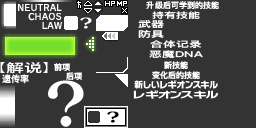
<style>
.page{position:relative;width:256px;height:128px;background:#333333}
.page>*{position:absolute;margin:0}
.t1{font:8px "DFKingGothicSC14-Semibold";letter-spacing:0.005em;color:#ffffff}
.t2{font:8px "DFKingGothicSC14-Semibold";letter-spacing:0.005em;color:#ffffff;scale:1.5 1}
.t3{font:8.4px "DFKingGothicSC14-Semibold";letter-spacing:0.005em;color:#ffffff;scale:1.56 1}
.t4{font:8px/10px "DFKingGothicSC14-Semibold";letter-spacing:0.005em;color:#ffffff;scale:1.6 1}
.t5{font:12px "DFKingGothicSC14-Semibold";letter-spacing:0.005em;color:#ffffff;scale:1.5 1}
.t6{font:8px/10px "DFKingGothicSC14-Semibold";letter-spacing:0.005em;color:#ffffff}
.t7{font:9px "DFKingGothicSC14-Semibold";letter-spacing:0.005em;color:#ffffff}
</style>
<div class="page">
<p class="t1" style="left:146px;top:1px;width:73px;height:8px">升级后可学到的技能</p>
<p class="t2" style="left:152px;top:11px;width:48px;height:8px">持有技能</p>
<p class="t3" style="left:138px;top:20px;width:26px;height:8px">武器</p>
<p class="t3" style="left:138px;top:30px;width:26px;height:8px">防具</p>
<p class="t4" style="left:149px;top:40px;width:54px;height:18px;text-align:center">合体记录<br>恶魔DNA</p>
<p class="t5" style="left:6px;top:62px;width:36px;height:12px">解说</p>
<p class="t1" style="left:54px;top:63px;width:16px;height:9px">前项</p>
<p class="t6" style="left:152px;top:61px;width:48px;height:18px;text-align:center">新技能<br>变化后的技能</p>
<p class="t7" style="left:2px;top:74px;width:27px;height:10px">遗传率</p>
<p class="t1" style="left:66px;top:72px;width:16px;height:9px">后项</p>
</div>
